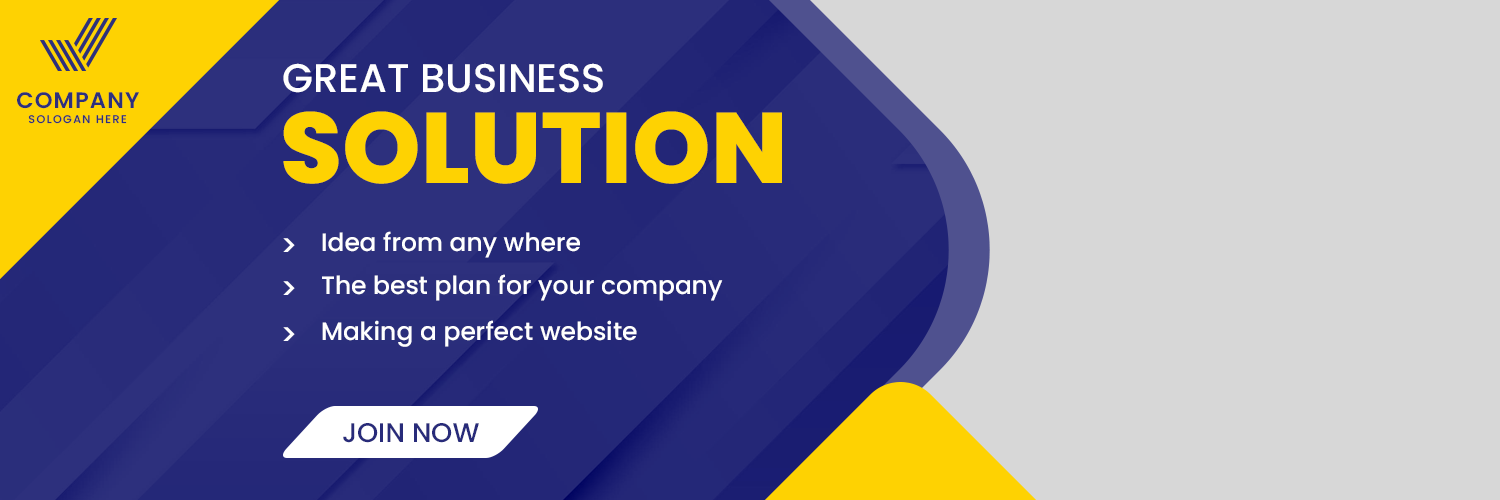
<style>
.page{position:relative;width:1500px;height:500px;background:#d7d7d7}
.page>*{position:absolute;margin:0}
.t1{font:40px "Poppins-Medium";color:#ffffff}
.t2{font:22.4px "Poppins-SemiBold";letter-spacing:0.05em;color:#2d307d}
.t3{font:100px "Poppins-ExtraBold";color:#fed202}
.t4{font:11.1px "Poppins-Medium";letter-spacing:0.125em;color:#2d307d}
.t5{font:25px "Poppins-Medium";color:#ffffff}
.t6{font:30px "Poppins-Medium";color:#ffffff}
.t7{font:27px "Poppins-Medium";color:#282b7a}
</style>
<div class="page">
<p class="t1" style="left:283px;top:63px;width:320px;height:30px">GREAT BUSINESS</p>
<p class="t2" style="left:17px;top:92px;width:122px;height:17px">COMPANY</p>
<p class="t3" style="left:283px;top:111px;width:499px;height:73px">SOLUTION</p>
<p class="t4" style="left:28px;top:115px;width:99px;height:9px">SOLOGAN HERE</p>
<p class="t5" style="left:322px;top:231px;width:258px;height:27px">Idea from any where</p>
<p class="t6" style="left:283px;top:238px;width:12px;height:14px">&gt;</p>
<p class="t6" style="left:283px;top:281px;width:12px;height:14px">&gt;</p>
<p class="t5" style="left:322px;top:274px;width:401px;height:27px">The best plan for your company</p>
<p class="t6" style="left:283px;top:327px;width:12px;height:14px">&gt;</p>
<p class="t5" style="left:322px;top:320px;width:315px;height:27px">Making a perfect website</p>
<p class="t7" style="left:343px;top:423px;width:136px;height:20px">JOIN NOW</p>
</div>
